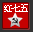
<style>
.page{position:relative;width:33px;height:32px;background:#c50000}
.page>*{position:absolute;margin:0}
.t1{font:10.4px "SimSun";letter-spacing:-0.25em;color:#ffffff}
</style>
<div class="page">
<p class="t1" style="left:4px;top:4px;width:24px;height:8px">红七五</p>
</div>
